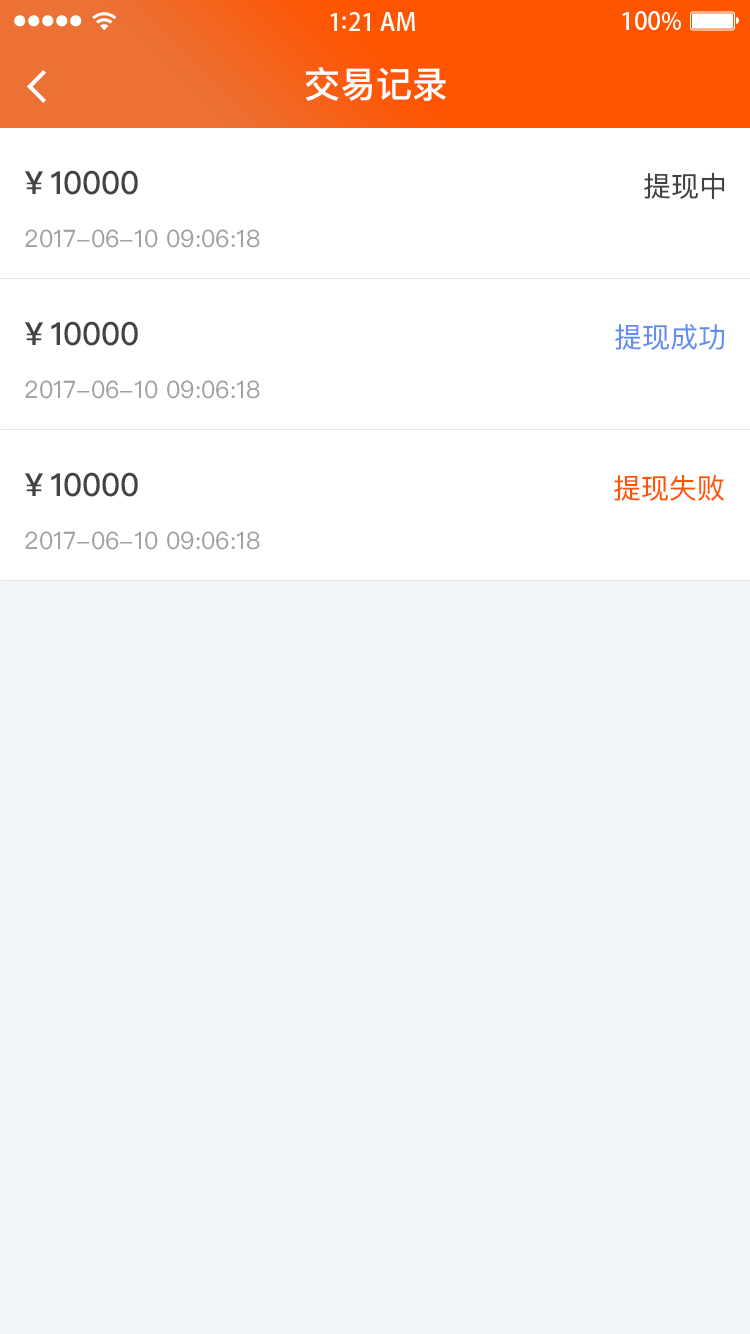
<style>
.page{position:relative;width:750px;height:1334px;background:#f2f5f7}
.page>*{position:absolute;margin:0}
.t1{font:36px "PingFangSC-Medium";color:#ffffff}
.t2{font:32px "PingFangSC-Medium";color:#434343}
.t3{font:28px "PingFangSC-Regular";color:#434343}
.t4{font:24px "PingFangSC-Regular";color:#a0a0a0}
.t5{font:28px "PingFangSC-Regular";color:#648df4}
.t6{font:28px "PingFangSC-Regular";color:#ff5400}
</style>
<div class="page">
<p class="t1" style="left:305px;top:67px;width:141px;height:34px">交易记录</p>
<p class="t2" style="left:24px;top:170px;width:114px;height:25px">￥10000</p>
<p class="t3" style="left:644px;top:172px;width:81px;height:28px">提现中</p>
<p class="t4" style="left:25px;top:229px;width:235px;height:19px">2017-06-10 09:06:18</p>
<p class="t2" style="left:24px;top:321px;width:114px;height:25px">￥10000</p>
<p class="t5" style="left:615px;top:324px;width:109px;height:26px">提现成功</p>
<p class="t4" style="left:25px;top:380px;width:235px;height:19px">2017-06-10 09:06:18</p>
<p class="t2" style="left:24px;top:472px;width:114px;height:25px">￥10000</p>
<p class="t6" style="left:614px;top:475px;width:110px;height:26px">提现失败</p>
<p class="t4" style="left:25px;top:531px;width:235px;height:19px">2017-06-10 09:06:18</p>
</div>
